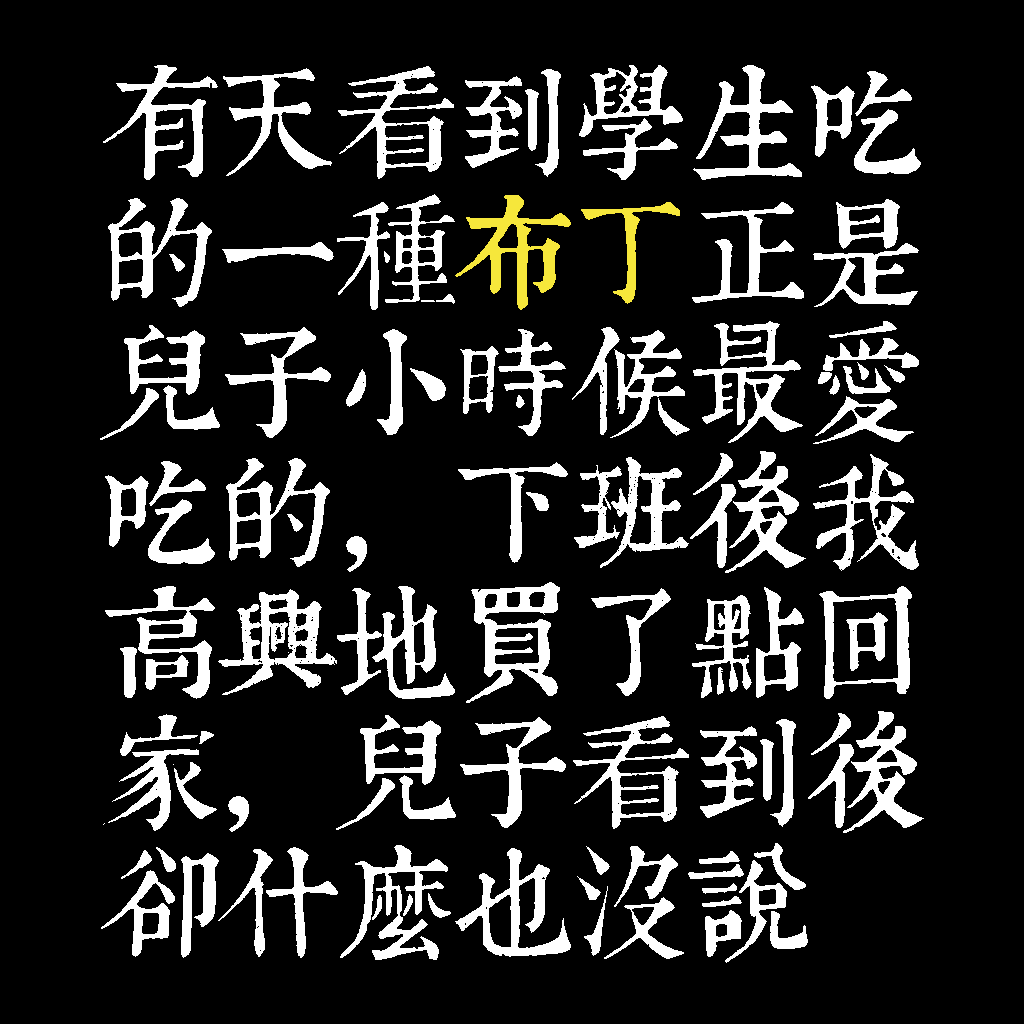
<style>
.page{position:relative;width:1024px;height:1024px;background:#000000}
.page>*{position:absolute;margin:0}
.t1{font:120px/130px "TpldKhangXiDictTrial";letter-spacing:-0.02em;color:#ffffff}
.t2{font:120px/130px "TpldKhangXiDictTrial";letter-spacing:-0.02em;color:#f6e73b}
</style>
<div class="page">
<p class="t1" style="left:100px;top:65px;width:824px;height:898px">有天看到學生吃<br>的一種<span class="t2">布丁</span>正是<br>兒子小時候最愛<br>吃的，下班後我<br>高興地買了點回<br>家，兒子看到後<br>卻什麼也沒說</p>
</div>
